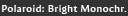
<style>
.page{position:relative;width:128px;height:16px;background:#333333}
.page>*{position:absolute;margin:0}
.t1{font:10px "AmiraParadiso";letter-spacing:0.05em;color:#ffffff}
</style>
<div class="page">
<p class="t1" style="left:2px;top:5px;width:125px;height:9px">Polaroid: Bright Monochr.</p>
</div>
